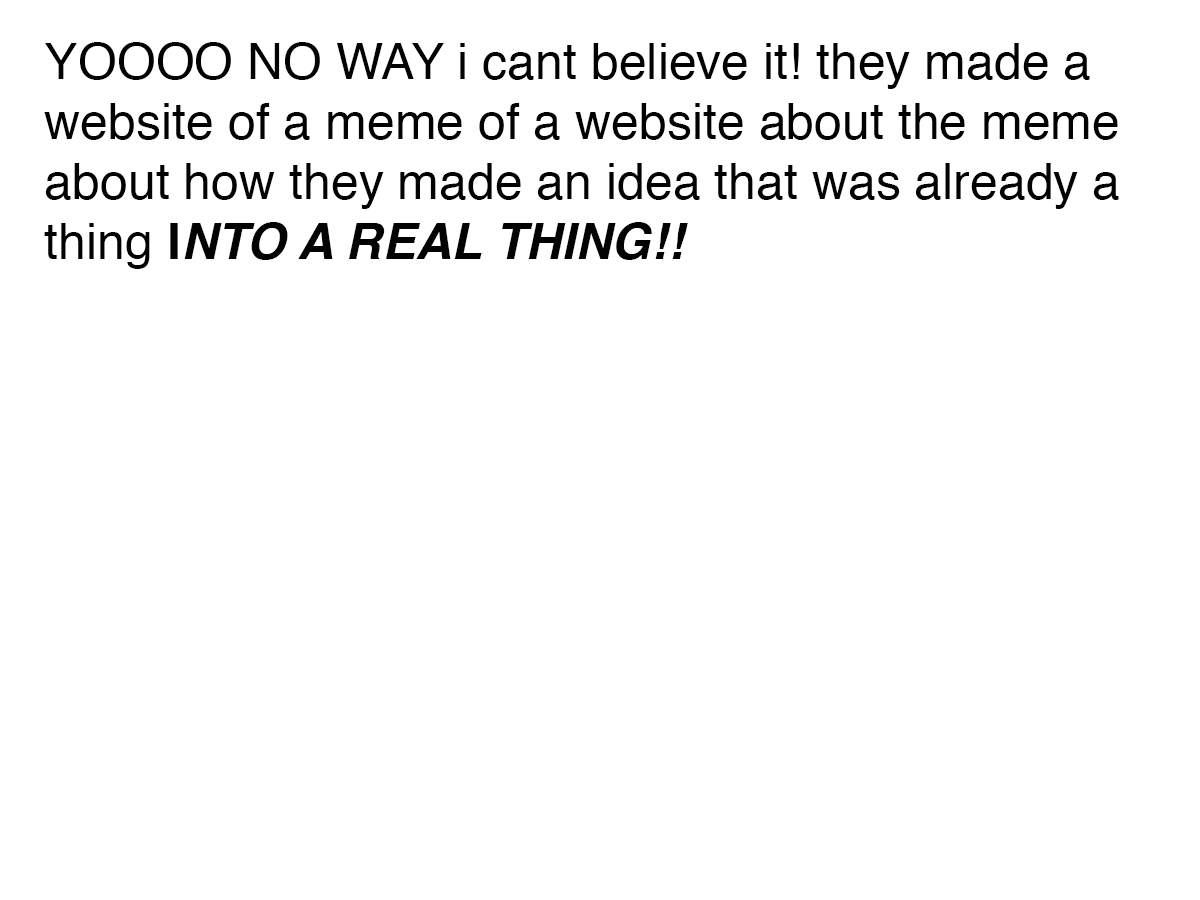
<style>
.page{position:relative;width:1200px;height:900px;background:#ffffff}
.page>*{position:absolute;margin:0}
.t1{font:50px "Helvetica";color:#020202}
.t2{font:50px "Helvetica-Bold";color:#020202}
.t3{font:50px "Helvetica-BoldOblique";color:#020202}
</style>
<div class="page">
<p class="t1" style="left:44px;top:42px;width:1075px;height:227px">YOOOO NO WAY i cant believe it! they made a website of a meme of a website about the meme about how they made an idea that was already a thing<span class="t2"> I</span><span class="t3">NTO A REAL THING!!</span></p>
</div>
